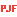
<style>
.page{position:relative;width:17px;height:17px;background:#ffffff}
.page>*{position:absolute;margin:0}
.t1{font:9px "ArialMT";color:#ee3e38;font-weight:bold}
</style>
<div class="page">
<p class="t1" style="left:1px;top:5px;width:16px;height:7px">PJF</p>
</div>
